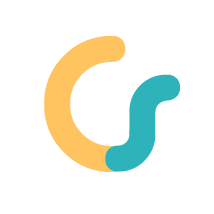
<style>
.page{position:relative;width:214px;height:214px;background:#ffffff}
.page>*{position:absolute;margin:0}
.t1{font:190px "Alba";color:#ffc35f}
.t2{font:190px "Alba";color:#2db4b9}
</style>
<div class="page">
<p class="t1" style="left:44px;top:36px;width:82px;height:136px">C</p>
<p class="t2" style="left:105px;top:74px;width:75px;height:98px">s</p>
</div>
